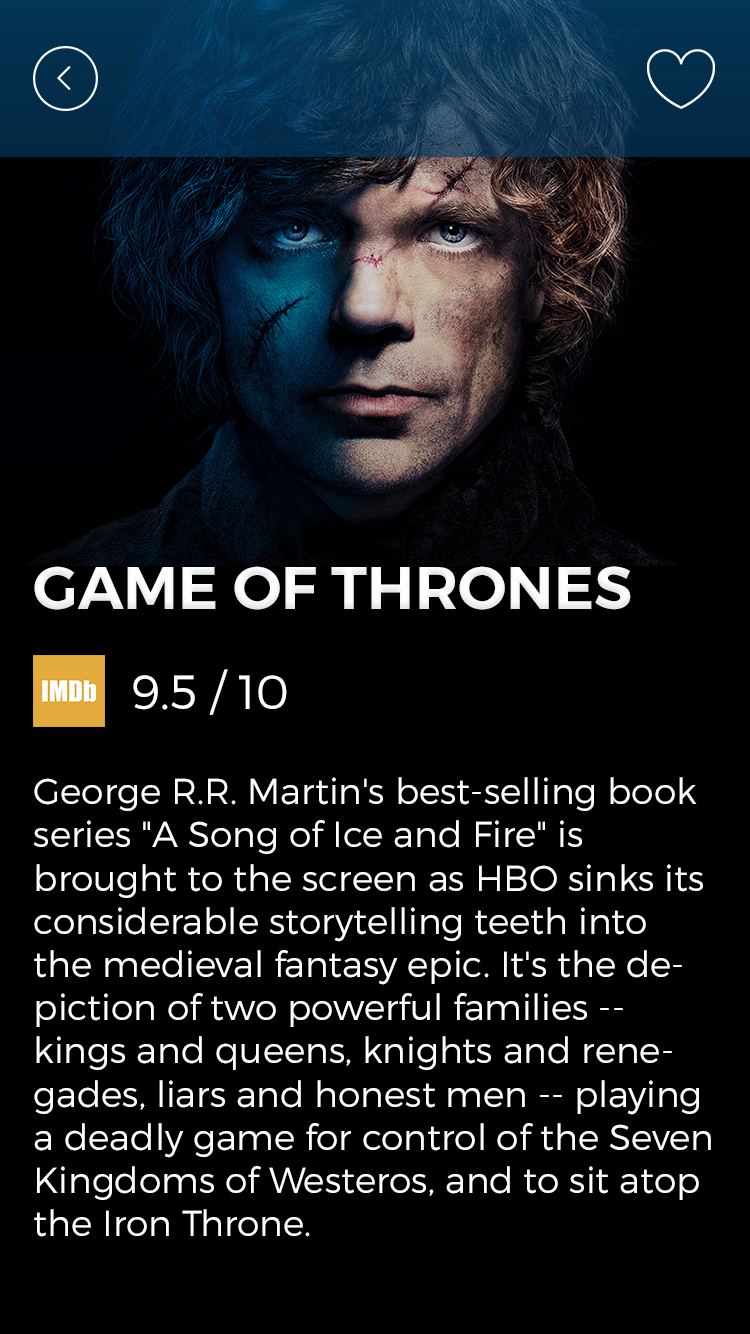
<style>
.page{position:relative;width:750px;height:1334px;background:#000000}
.page>*{position:absolute;margin:0}
.t1{font:60px "Montserrat-SemiBold";color:#ffffff}
.t2{font:48px "Montserrat-Light";color:#ffffff}
.t3{font:36px "Montserrat-Light";color:#ffffff}
</style>
<div class="page">
<p class="t1" style="left:34px;top:566px;width:597px;height:44px">GAME OF THRONES</p>
<p class="t2" style="left:133px;top:669px;width:154px;height:46px">9.5 / 10</p>
<p class="t3" style="left:33px;top:777px;width:678px;height:460px">George R.R. Martin's best-selling book series "A Song of Ice and Fire" is brought to the screen as HBO sinks its considerable storytelling teeth into the medieval fantasy epic. It's the depiction of two powerful families -- kings and queens, knights and renegades, liars and honest men -- playing a deadly game for control of the Seven Kingdoms of Westeros, and to sit atop the Iron Throne.</p>
</div>
